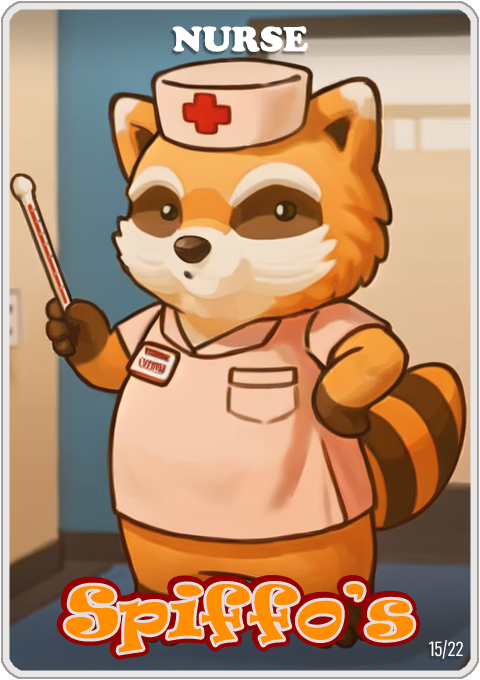
<style>
.page{position:relative;width:480px;height:680px}
.page>*{position:absolute;margin:0}
.t1{font:36px "CooperBlack";color:#ffffff}
.t2{font:65px "Ravie";color:#ff8e00}
.t3{font:20px "Bahnschrift-LightCondensed";color:#ffffff}
</style>
<div class="page">
<p class="t1" style="left:172px;top:26px;width:136px;height:26px">NURSE</p>
<p class="t2" style="left:65px;top:584px;width:349px;height:69px">Spiffo’s</p>
<p class="t3" style="left:429px;top:640px;width:34px;height:19px">15/22</p>
</div>
